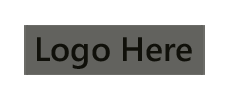
<style>
.page{position:relative;width:229px;height:100px;background:#ffffff}
.page>*{position:absolute;margin:0}
.t1{font:33.8px "SegoeUI-Semibold";color:#10100a}
</style>
<div class="page">
<p class="t1" style="left:37px;top:37px;width:155px;height:32px">Logo Here</p>
</div>
